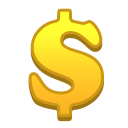
<style>
.page{position:relative;width:128px;height:128px;background:#ffffff}
.page>*{position:absolute;margin:0}
.t1{font:137.1px "CooperBlackStd";font-weight:bold}
</style>
<div class="page">
<p class="t1" style="left:28px;top:8px;width:76px;height:110px">$</p>
</div>
